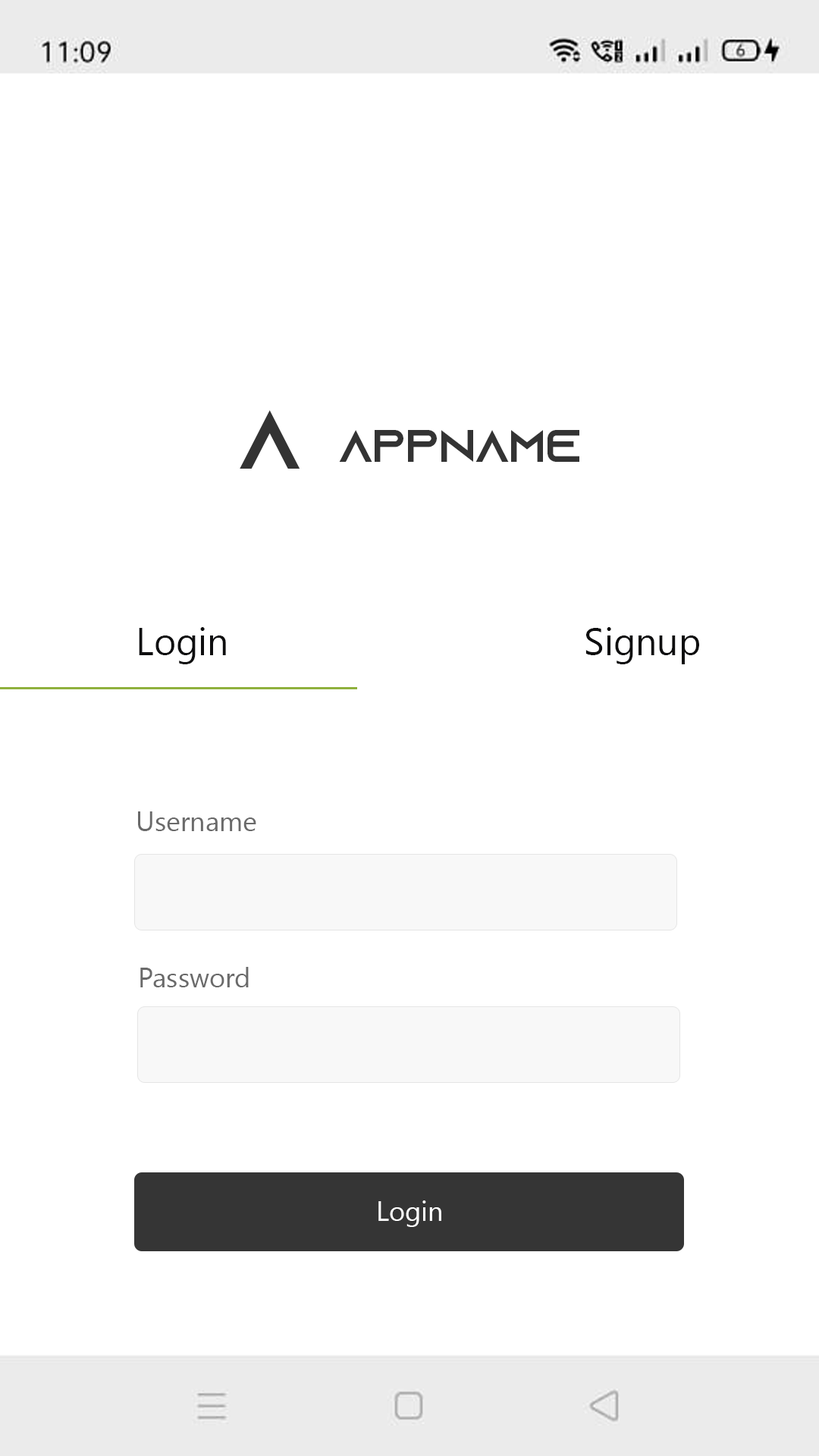
<style>
.page{position:relative;width:819px;height:1456px;background:#ffffff}
.page>*{position:absolute;margin:0}
.t1{font:83.9px "AzonixRegular";color:#333333}
.t2{font:45.5px "AzonixRegular";color:#333333}
.t3{font:37.9px "SegoeUI";color:#0e0e0f}
.t4{font:27.3px "SegoeUI";color:#6a6a6a}
.t5{font:27.3px "SegoeUI";color:#ffffff}
</style>
<div class="page">
<p class="t1" style="left:240px;top:410px;width:60px;height:59px">A</p>
<p class="t2" style="left:339px;top:430px;width:240px;height:32px">AppName</p>
<p class="t3" style="left:139px;top:627px;width:87px;height:37px">Login</p>
<p class="t3" style="left:585px;top:627px;width:114px;height:37px">Signup</p>
<p class="t4" style="left:138px;top:811px;width:118px;height:20px">Username</p>
<p class="t4" style="left:140px;top:967px;width:109px;height:20px">Password</p>
<p class="t5" style="left:378px;top:1200px;width:63px;height:27px">Login</p>
</div>
